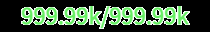
<style>
.page{position:relative;width:210px;height:32px;background:#000000}
.page>*{position:absolute;margin:0}
.t1{font:22px "WebPSD-18463539-0-Regular";color:#65ee62;font-weight:bold}
</style>
<div class="page">
<p class="t1" style="left:0px;top:0px;width:210px;height:32px">999.99k/999.99k</p>
</div>
